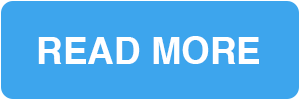
<style>
.page{position:relative;width:300px;height:100px;background:#3da5ed}
.page>*{position:absolute;margin:0}
.t1{font:36.7px "Helvetica-Bold";color:#ffffff}
</style>
<div class="page">
<p class="t1" style="left:38px;top:36px;width:221px;height:28px">READ MORE</p>
</div>
